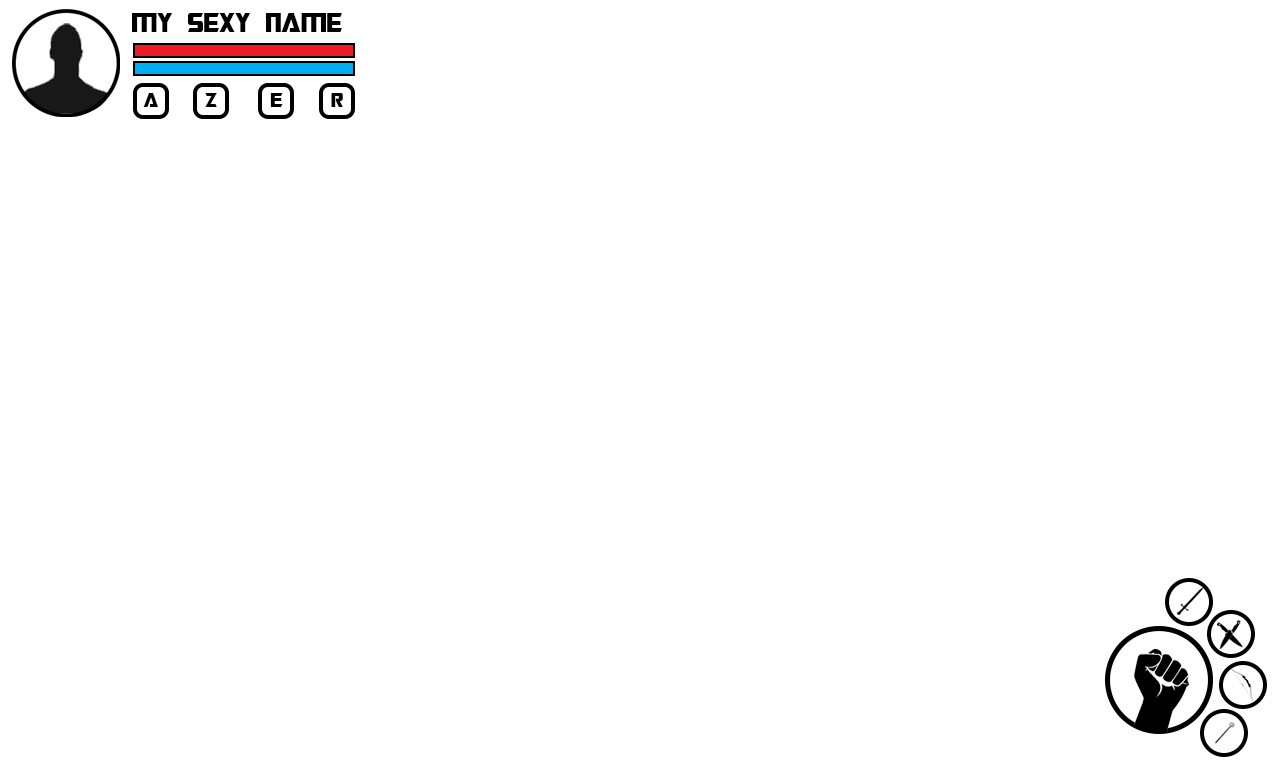
<style>
.page{position:relative;width:1280px;height:768px;background:#ffffff}
.page>*{position:absolute;margin:0}
.t1{font:30px "TransformersMovie";letter-spacing:-0.004em;color:#000000}
.t2{font:22.6px "TransformersMovie";letter-spacing:-0.004em;color:#000000}
</style>
<div class="page">
<p class="t1" style="left:132px;top:13px;width:210px;height:19px">MY SEXY NAME</p>
<p class="t2" style="left:143px;top:93px;width:16px;height:14px">A</p>
<p class="t2" style="left:205px;top:93px;width:12px;height:14px">Z</p>
<p class="t2" style="left:270px;top:93px;width:13px;height:14px">E</p>
<p class="t2" style="left:331px;top:93px;width:12px;height:14px">R</p>
</div>
